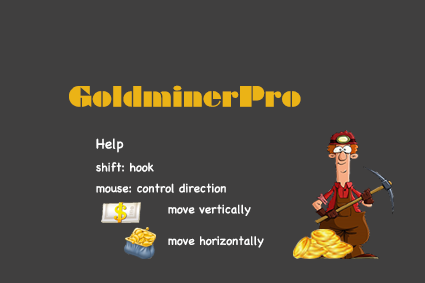
<style>
.page{position:relative;width:425px;height:283px;background:#403f3f}
.page>*{position:absolute;margin:0}
.t1{font:26.6px "Braggadocio";color:#ebb316;scale:0.96 1}
.t2{font:12px "Chalkboard";color:#fefefe}
.t3{font:14px "Chalkboard";color:#fefefe}
.t4{font:12px "Chalkboard";color:#ffffff}
</style>
<div class="page">
<p class="t1" style="left:69px;top:85px;width:232px;height:22px">GoldminerPro</p>
<p class="t2" style="left:96px;top:138px;width:168px;height:110px"><span class="t3">Help</span>       shift: hook     mouse: control direction      <span class="t4">move vertically<br>    <br>  move horizontally</span></p>
</div>
